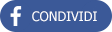
<style>
.page{position:relative;width:112px;height:32px;background:#3b5998}
.page>*{position:absolute;margin:0}
.t1{font:13px "Tahoma";color:#ffffff}
</style>
<div class="page">
<p class="t1" style="left:32px;top:11px;width:65px;height:11px">CONDIVIDI</p>
</div>
